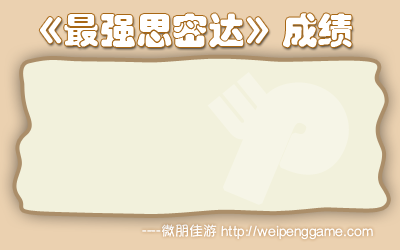
<style>
.page{position:relative;width:400px;height:250px;background:#f2f1dc}
.page>*{position:absolute;margin:0}
.t1{font:36px "STHupo";letter-spacing:0.005em;color:#ffffff}
.t2{font:74.4px "STHupo";letter-spacing:0.005em;color:#ffffff}
.t3{font:185.9px "STHupo";letter-spacing:0.005em;color:#ffffff;font-weight:bold}
.t4{font:14px "YuppySC-Regular";letter-spacing:0.005em;color:#ffffff}
</style>
<div class="page">
<p class="t1" style="left:39px;top:13px;width:313px;height:35px">《最强思密达》成绩</p>
<p class="t2" style="left:207px;top:72px;width:68px;height:68px;rotate:-39deg">W</p>
<p class="t3" style="left:223px;top:82px;width:126px;height:123px;rotate:23deg">P</p>
<p class="t4" style="left:142px;top:224px;width:231px;height:16px">----微朋佳游 http://weipenggame.com</p>
</div>
